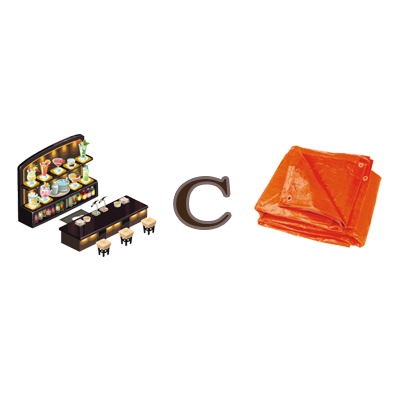
<style>
.page{position:relative;width:400px;height:400px;background:#ffffff}
.page>*{position:absolute;margin:0}
.t1{font:88.7px "Kokila";color:#3f2916;scale:1.29 1}
</style>
<div class="page">
<p class="t1" style="left:176px;top:179px;width:53px;height:48px">C</p>
</div>
